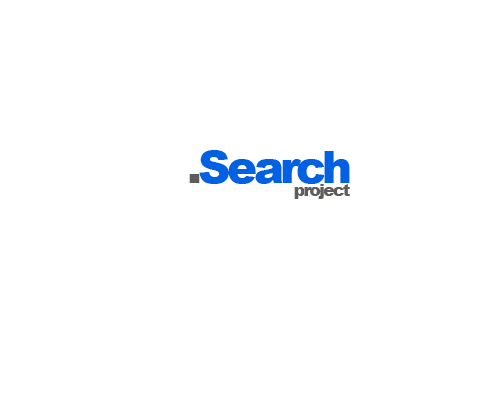
<style>
.page{position:relative;width:500px;height:400px;background:#ffffff}
.page>*{position:absolute;margin:0}
.t1{font:45.2px "Arial-Black";letter-spacing:-0.085em;color:#0261e2}
.t2{font:45.2px "Arial-Black";letter-spacing:-0.085em;color:#5f5c59}
.t3{font:28.6px "Arial-Black";letter-spacing:-0.085em;color:#5f5c59}
</style>
<div class="page">
<p class="t1" style="left:189px;top:150px;width:161px;height:34px"><span class="t2">.</span>Search</p>
<p class="t3" style="left:294px;top:184px;width:56px;height:15px">project</p>
</div>
